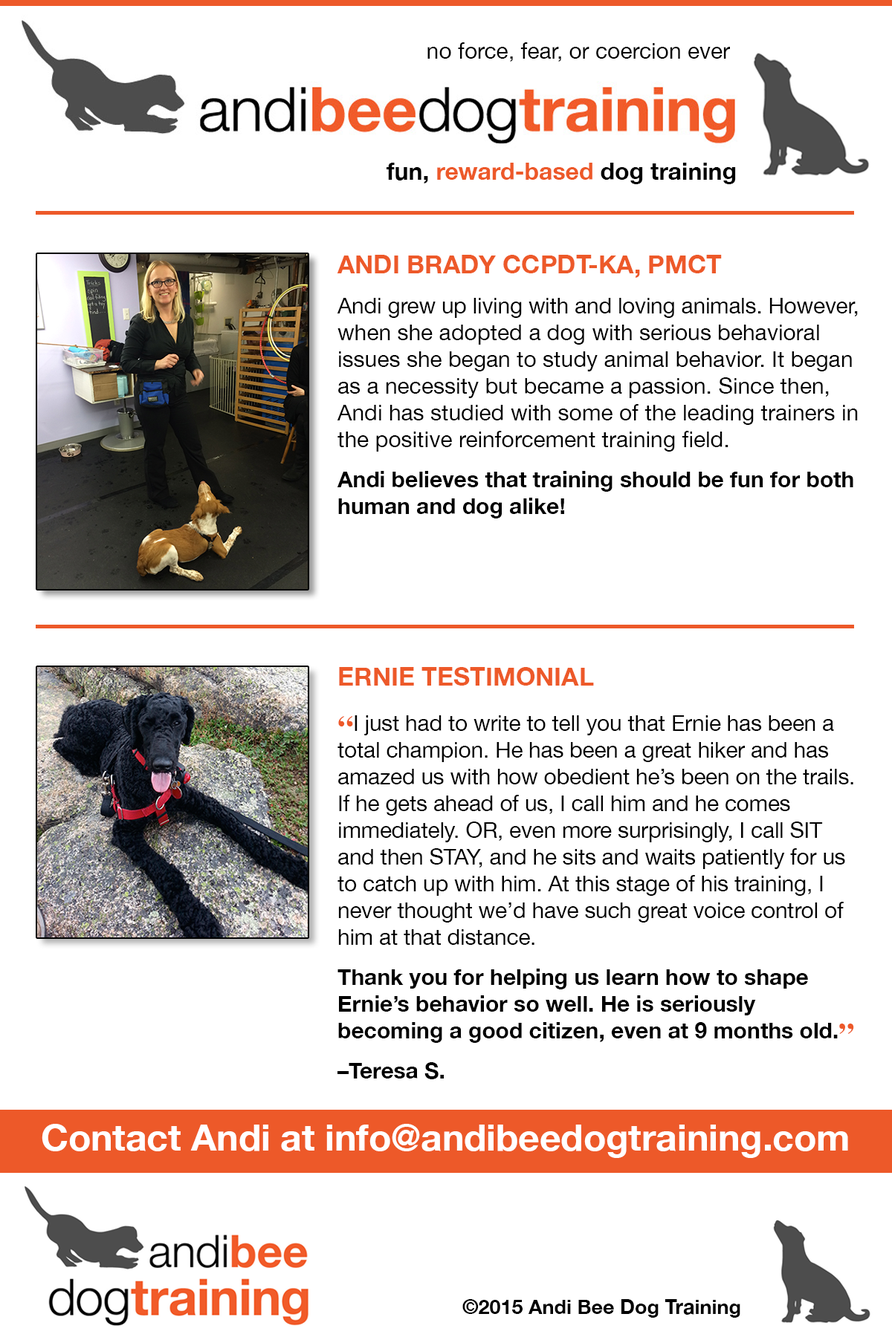
<style>
.page{position:relative;width:892px;height:1337px;background:#ffffff}
.page>*{position:absolute;margin:0}
.t1{font:22.3px "HelveticaNeue";color:#000000}
.t2{font:23.8px "HelveticaNeue-Bold";color:#ed5929}
.t3{font:23.8px "HelveticaNeue-Bold";color:#000000}
.t4{font:25.3px "HelveticaNeue-Bold";color:#ed5929;text-transform:uppercase}
.t5{font:22.3px/26.7px "HelveticaNeue";color:#000000}
.t6{font:22.3px/26.7px "HelveticaNeue";letter-spacing:-0.01em;color:#000000}
.t7{font:22.3px/26.7px "HelveticaNeue-Bold";color:#000000}
.t8{font:31.2px/26.7px "Times-Bold";color:#ed5929}
.t9{font:36.2px "HelveticaNeue-Bold";color:#ffffff}
.t10{font:20.1px "HelveticaNeue-Bold";color:#000000}
</style>
<div class="page">
<p class="t1" style="left:427px;top:42px;width:303px;height:20px">no force, fear, or coercion ever</p>
<p class="t2" style="left:386px;top:163px;width:350px;height:21px"><span class="t3">fun, </span>reward-based<span class="t3"> dog training</span></p>
<p class="t4" style="left:337px;top:255px;width:384px;height:23px">Andi Brady CCPDT-KA, PMCT</p>
<p class="t5" style="left:337px;top:298px;width:520px;height:221px"><span class="t6">Andi grew up living with and loving animals. However, </span>when she adopted a dog with serious behavioral issues she began to study animal behavior. It began as a necessity but became a passion. Since then, Andi has studied with some of the leading trainers in the positive reinforcement training field. <br><span class="t7">Andi believes that training should be fun for both human and dog alike!</span></p>
<p class="t4" style="left:339px;top:667px;width:255px;height:19px">Ernie Testimonial</p>
<p class="t6" style="left:337px;top:716px;width:517px;height:364px"><span class="t8">“</span>I just had to write to tell you that Ernie has been a total champion. He has been a great hiker and has amazed us with how obedient he’s been on the trails. If he gets ahead of us, I call him and he comes <br>immediately. OR, even more surprisingly, I call SIT and then STAY, and he sits and waits patiently for us to catch up with him. At this stage of his training, I never thought we’d have such great voice control of him at that distance<span class="t5">. <br></span><span class="t7">Thank you for helping us learn how to shape <br>Ernie’s behavior so well. He is seriously <br>becoming a good citizen, even at 9 months old.</span><span class="t8">”<br></span><span class="t7">–Teresa S.</span></p>
<p class="t9" style="left:42px;top:1124px;width:806px;height:34px">Contact Andi at info@andibeedogtraining.com</p>
<p class="t10" style="left:462px;top:1300px;width:278px;height:18px">©2015 Andi Bee Dog Training</p>
</div>
